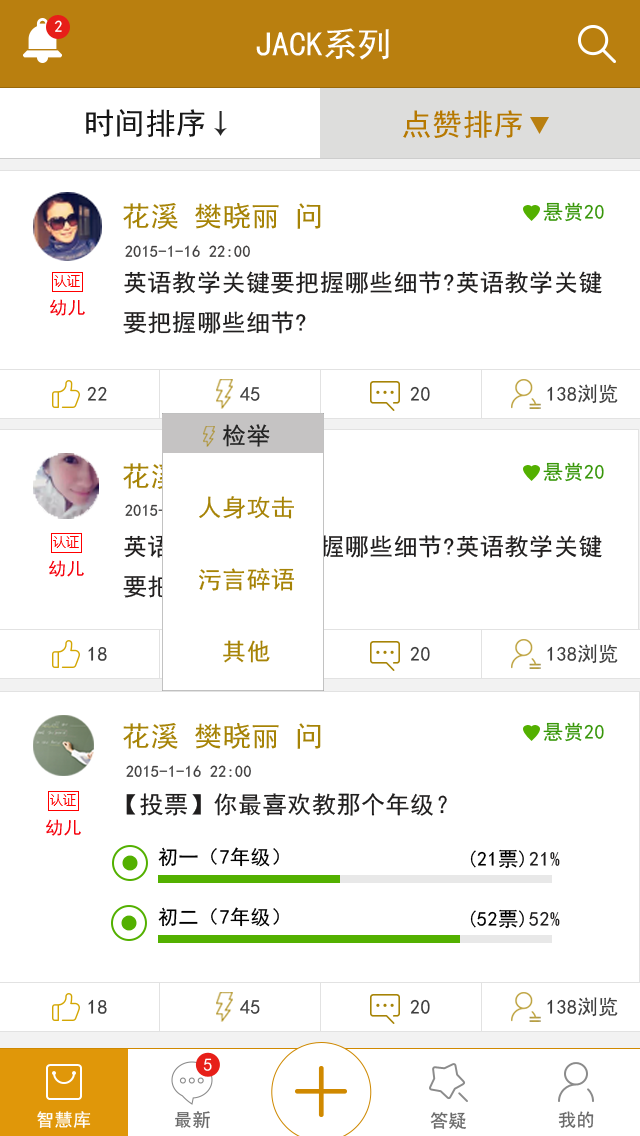
<style>
.page{position:relative;width:640px;height:1136px;background:#ffffff}
.page>*{position:absolute;margin:0}
.t1{font:16px "SimHei";color:#ffffff}
.t2{font:34px "SimHei";color:#ffffff}
.t3{font:30px "SimHei";letter-spacing:0.025em;color:#171717}
.t4{font:30px "SimHei";letter-spacing:0.025em;color:#b67800}
.t5{font:28px "SimHei";letter-spacing:0.025em;color:#a68306}
.t6{font:20px "SimHei";letter-spacing:0.025em;color:#38970a}
.t7{font:16px "SimHei";letter-spacing:0.025em;color:#403f3f}
.t8{font:24px/40px "SimHei";letter-spacing:0.025em;color:#201e1e}
.t9{font:18px "SimHei";letter-spacing:0.025em;color:#f5020d}
.t10{font:20px "SimHei";letter-spacing:0.025em;color:#3e3e3e}
.t11{font:24px/72px "SimHei";letter-spacing:0.025em;color:#a68306}
.t12{font:24px/72px "SimHei";letter-spacing:0.025em;color:#232323}
.t13{font:28px "SimHei";letter-spacing:0.025em;color:#ffffff}
.t14{font:16px "SimHei";letter-spacing:0.025em}
.t15{font:24px/40px "SimHei";letter-spacing:0.025em}
.t16{font:24px "SimHei";letter-spacing:0.025em;color:#201e1e}
.t17{font:20px/60px "SimHei";letter-spacing:0.025em;color:#000000}
.t18{font:20px/60px "SimHei";letter-spacing:0.025em;color:#201e1e}
.t19{font:18px "SimHei";letter-spacing:0.025em;color:#ffffff}
.t20{font:18px "SimHei";letter-spacing:0.025em;color:#696969}
</style>
<div class="page">
<p class="t1" style="left:54px;top:20px;width:8px;height:12px">2</p>
<p class="t2" style="left:256px;top:28px;width:133px;height:32px">JACK系列</p>
<p class="t3" style="left:86px;top:109px;width:119px;height:28px">时间排序</p>
<p class="t4" style="left:403px;top:110px;width:119px;height:28px">点赞排序</p>
<p class="t5" style="left:123px;top:203px;width:198px;height:26px">花溪 樊晓丽 问</p>
<p class="t6" style="left:543px;top:202px;width:61px;height:20px">悬赏20</p>
<p class="t7" style="left:125px;top:245px;width:125px;height:12px">2015-1-16 22:00</p>
<p class="t8" style="left:123px;top:271px;width:479px;height:63px">英语教学关键要把握哪些细节?英语教学关键<br>要把握哪些细节?</p>
<p class="t9" style="left:50px;top:299px;width:35px;height:17px">幼儿</p>
<p class="t10" style="left:87px;top:386px;width:20px;height:15px">22</p>
<p class="t10" style="left:240px;top:387px;width:20px;height:14px">45</p>
<p class="t10" style="left:410px;top:386px;width:20px;height:15px">20</p>
<p class="t10" style="left:547px;top:384px;width:71px;height:20px">138浏览</p>
<p class="t11" style="left:199px;top:424px;width:95px;height:239px;text-align:center"><span class="t12">检举<br></span>人身攻击<br>污言碎语<br>其他</p>
<p class="t6" style="left:543px;top:462px;width:61px;height:20px">悬赏20</p>
<p class="t13" style="left:123px;top:463px;width:198px;height:26px">花溪 樊晓丽 问</p>
<p class="t14" style="left:125px;top:504px;width:125px;height:12px">2015-1-16 22:00</p>
<p class="t15" style="left:123px;top:535px;width:479px;height:63px">英语教学关键要把握哪些细节?英语教学关键<br>要把握哪些细节?</p>
<p class="t9" style="left:49px;top:560px;width:35px;height:17px">幼儿</p>
<p class="t10" style="left:88px;top:646px;width:19px;height:15px">18</p>
<p class="t10" style="left:410px;top:646px;width:20px;height:15px">20</p>
<p class="t10" style="left:547px;top:644px;width:71px;height:20px">138浏览</p>
<p class="t5" style="left:123px;top:723px;width:198px;height:26px">花溪 樊晓丽 问</p>
<p class="t6" style="left:543px;top:722px;width:61px;height:20px">悬赏20</p>
<p class="t7" style="left:126px;top:765px;width:125px;height:12px">2015-1-16 22:00</p>
<p class="t16" style="left:126px;top:793px;width:321px;height:23px">【投票】你最喜欢教那个年级？</p>
<p class="t9" style="left:46px;top:819px;width:35px;height:17px">幼儿</p>
<p class="t17" style="left:158px;top:847px;width:121px;height:80px">初一（7年级）<br>初二（7年级）</p>
<p class="t17" style="left:470px;top:849px;width:90px;height:80px;text-align:right">(21票)<span class="t18">21%<br></span>(52票)<span class="t18">52%</span></p>
<p class="t10" style="left:88px;top:999px;width:19px;height:15px">18</p>
<p class="t10" style="left:240px;top:1000px;width:20px;height:14px">45</p>
<p class="t10" style="left:410px;top:999px;width:20px;height:15px">20</p>
<p class="t10" style="left:547px;top:997px;width:71px;height:20px">138浏览</p>
<p class="t19" style="left:203px;top:1058px;width:9px;height:13px">5</p>
<p class="t19" style="left:37px;top:1111px;width:54px;height:17px">智慧库</p>
<p class="t20" style="left:175px;top:1111px;width:35px;height:18px">最新</p>
<p class="t20" style="left:430px;top:1112px;width:36px;height:17px">答疑</p>
<p class="t20" style="left:558px;top:1111px;width:36px;height:17px">我的</p>
</div>
